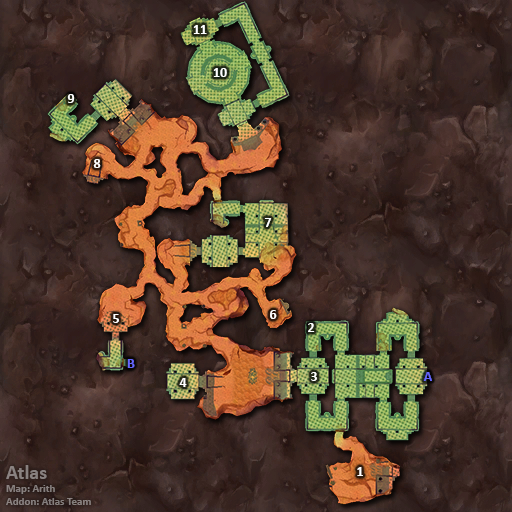
<style>
.page{position:relative;width:512px;height:512px}
.page>*{position:absolute;margin:0}
.t1{font:14px "Calibri-Bold";color:#ffffff}
.t2{font:14px "Calibri-Bold";color:#6666ff}
.t3{font:11px "Calibri-Bold";color:#88817f}
.t4{font:20px "Calibri-Bold";color:#88817f}
</style>
<div class="page">
<p class="t1" style="left:193px;top:25px;width:14px;height:9px">11</p>
<p class="t1" style="left:213px;top:68px;width:14px;height:9px">10</p>
<p class="t1" style="left:67px;top:94px;width:8px;height:9px">9</p>
<p class="t1" style="left:93px;top:159px;width:8px;height:9px">8</p>
<p class="t1" style="left:264px;top:218px;width:8px;height:9px">7</p>
<p class="t1" style="left:113px;top:314px;width:6px;height:9px">5</p>
<p class="t1" style="left:270px;top:310px;width:7px;height:9px">6</p>
<p class="t1" style="left:308px;top:323px;width:7px;height:9px">2</p>
<p class="t2" style="left:127px;top:359px;width:8px;height:9px">B</p>
<p class="t1" style="left:311px;top:372px;width:6px;height:9px">3</p>
<p class="t2" style="left:423px;top:372px;width:9px;height:9px">A</p>
<p class="t1" style="left:179px;top:378px;width:8px;height:9px">4</p>
<p class="t3" style="left:6px;top:465px;width:85px;height:40px"><span class="t4">Atlas<br></span>Map: Arith<br>Addon: Atlas Team</p>
<p class="t1" style="left:357px;top:467px;width:6px;height:9px">1</p>
</div>
